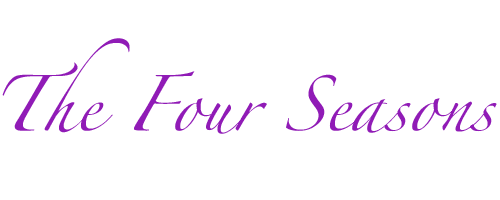
<style>
.page{position:relative;width:500px;height:200px;background:#ffffff}
.page>*{position:absolute;margin:0}
.t1{font:50px "Zapfino";color:#901bb6}
</style>
<div class="page">
<p class="t1" style="left:2px;top:38px;width:495px;height:96px">The Four Seasons</p>
</div>
